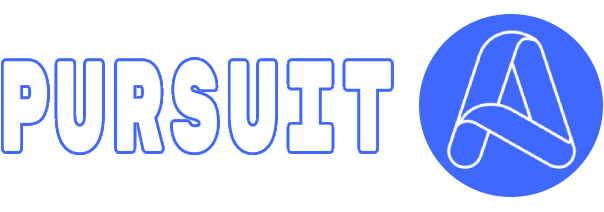
<style>
.page{position:relative;width:604px;height:212px;background:#ffffff}
.page>*{position:absolute;margin:0}
.t1{font:128.3px "RubikMonoOne-Regular";color:#ffffff;scale:0.48 1}
</style>
<div class="page">
<p class="t1" style="left:3px;top:59px;width:388px;height:94px">P U R S U I T</p>
</div>
